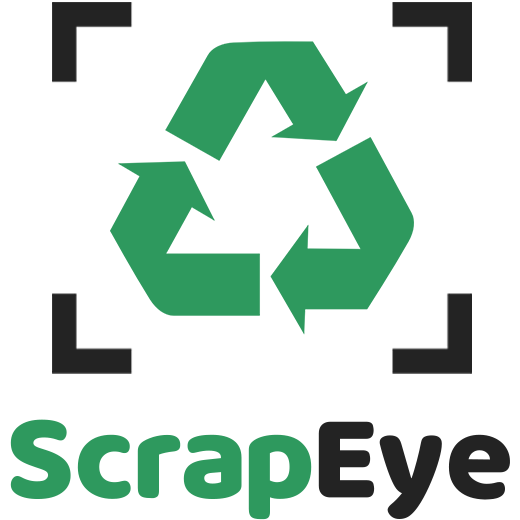
<style>
.page{position:relative;width:520px;height:520px;background:#ffffff}
.page>*{position:absolute;margin:0}
.t1{font:124.1px "Quentin_Pro-Regular";letter-spacing:0.03em;color:#2e995e}
.t2{font:124.1px "Quentin_Pro-Regular";letter-spacing:0.03em;color:#232323}
</style>
<div class="page">
<p class="t1" style="left:10px;top:419px;width:500px;height:101px">Scrap<span class="t2">Eye</span></p>
</div>
